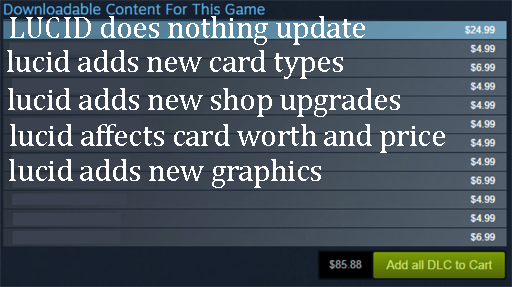
<style>
.page{position:relative;width:512px;height:287px}
.page>*{position:absolute;margin:0}
.t1{font:30.6px "CambriaMath";color:#ffffff}
</style>
<div class="page">
<p class="t1" style="left:10px;top:16px;width:355px;height:29px">LUCID does nothing update</p>
<p class="t1" style="left:7px;top:50px;width:336px;height:29px">lucid adds new card types</p>
<p class="t1" style="left:8px;top:88px;width:392px;height:29px">lucid adds new shop upgrades</p>
<p class="t1" style="left:10px;top:124px;width:435px;height:29px">lucid affects card worth and price</p>
<p class="t1" style="left:9px;top:159px;width:312px;height:29px">lucid adds new graphics</p>
</div>
